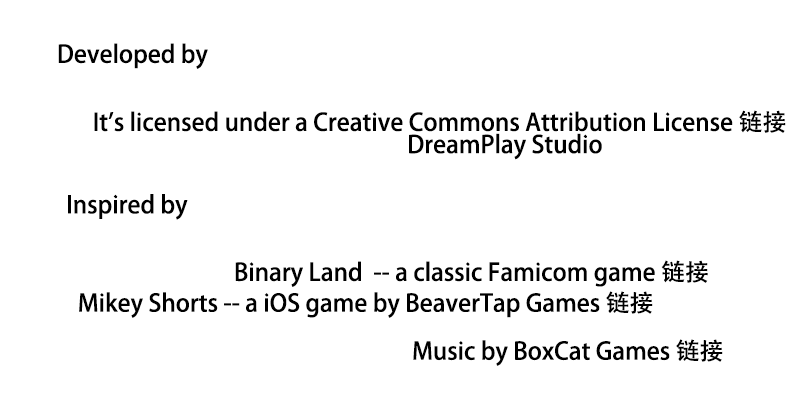
<style>
.page{position:relative;width:800px;height:400px;background:#ffffff}
.page>*{position:absolute;margin:0}
.t1{font:24px "AdobeHeitiStd-Regular";color:#000000}
</style>
<div class="page">
<p class="t1" style="left:58px;top:43px;width:150px;height:26px">Developed by</p>
<p class="t1" style="left:94px;top:110px;width:692px;height:23px">It's licensed under a Creative Commons Attribution License 链接</p>
<p class="t1" style="left:409px;top:133px;width:193px;height:27px">DreamPlay Studio</p>
<p class="t1" style="left:68px;top:194px;width:120px;height:26px">Inspired by</p>
<p class="t1" style="left:235px;top:260px;width:473px;height:27px">Binary Land  -- a classic Famicom game 链接</p>
<p class="t1" style="left:79px;top:291px;width:574px;height:27px">Mikey Shorts -- a iOS game by BeaverTap Games 链接</p>
<p class="t1" style="left:413px;top:339px;width:310px;height:27px">Music by BoxCat Games 链接</p>
</div>
